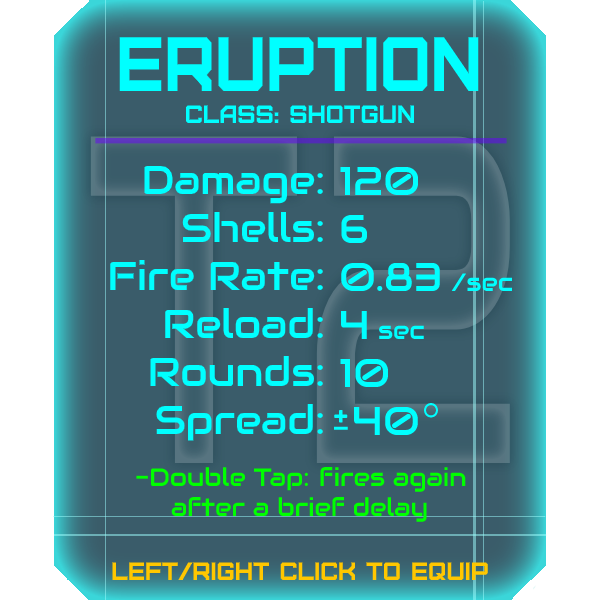
<style>
.page{position:relative;width:600px;height:600px;background:#3a5c6a}
.page>*{position:absolute;margin:0}
.t1{font:76.8px "Furore";color:#00ffff;scale:0.91 1}
.t2{font:25px "Furore";color:#00ffff}
.t3{font:40px "Audiowide-Regular";color:#00ffff}
.t4{font:25px "Audiowide-Regular";color:#00ffff}
.t5{font:25px "Audiowide-Regular";color:#00ff00}
.t6{font:25px "Furore";color:#ffc700}
</style>
<div class="page">
<p class="t1" style="left:119px;top:37px;width:360px;height:54px">eruption</p>
<p class="t2" style="left:186px;top:105px;width:228px;height:18px">Class: Shotgun</p>
<p class="t3" style="left:110px;top:165px;width:213px;height:276px;text-align:right">Damage:<br>Shells:<br>Fire Rate:<br>Reload:<br>Rounds:<br>Spread:</p>
<p class="t3" style="left:340px;top:166px;width:173px;height:269px">120<br>6<br>0.83 <span class="t4">/sec<br></span>4 <span class="t4">sec<br></span>10<br> 40</p>
<p class="t5" style="left:136px;top:467px;width:330px;height:55px">-Double Tap:   ires again<br> after a brief delay</p>
<p class="t5" style="left:320px;top:467px;width:13px;height:19px">f</p>
<p class="t6" style="left:112px;top:562px;width:376px;height:18px">left/right click to equip</p>
</div>
